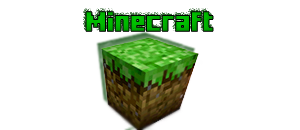
<style>
.page{position:relative;width:300px;height:130px;background:#ffffff}
.page>*{position:absolute;margin:0}
.t1{font:20px "MinercraftoryRegular";color:#00b100}
</style>
<div class="page">
<p class="t1" style="left:86px;top:11px;width:127px;height:21px">Minecraft</p>
</div>
